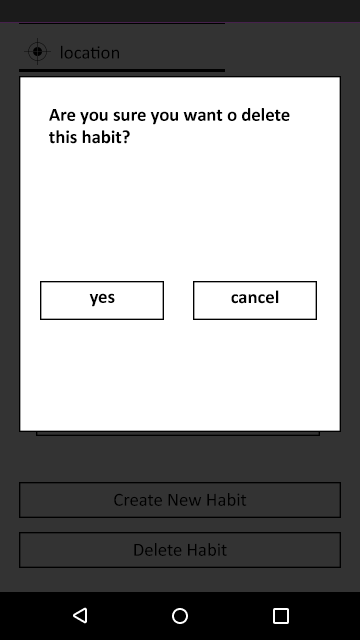
<style>
.page{position:relative;width:360px;height:640px;background:#ffffff}
.page>*{position:absolute;margin:0}
.t1{font:18.7px "Calibri";color:#000000}
.t2{font:18.7px "Calibri-Bold";color:#000000}
.t3{font:18.4px "Calibri-Bold";color:#000000}
.t4{font:18.6px "Calibri";color:#000000}
</style>
<div class="page">
<p class="t1" style="left:61px;top:45px;width:58px;height:14px">location</p>
<p class="t2" style="left:49px;top:108px;width:241px;height:36px">Are you sure you want o delete this habit?</p>
<p class="t2" style="left:89px;top:293px;width:26px;height:14px">yes</p>
<p class="t3" style="left:231px;top:290px;width:48px;height:14px">cancel</p>
<p class="t4" style="left:114px;top:493px;width:133px;height:13px">Create New Habit</p>
<p class="t4" style="left:134px;top:543px;width:93px;height:13px">Delete Habit</p>
</div>
